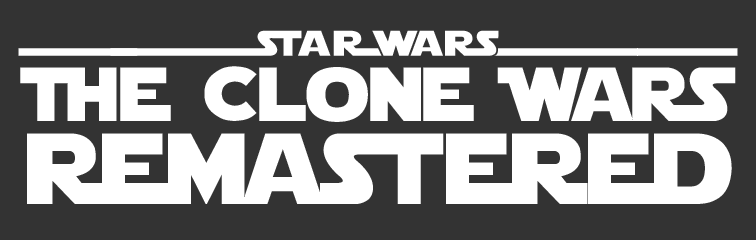
<style>
.page{position:relative;width:756px;height:240px;background:#333333}
.page>*{position:absolute;margin:0}
.t1{font:76px/83px "StarJediLogoDoubleLine1";color:#ffffff}
.t2{font:100px/83px "StarJediLogoDoubleLine1";color:#ffffff}
</style>
<div class="page">
<p class="t1" style="left:18px;top:30px;width:720px;height:174px;text-align:center">3Th3e Clo4ne Wa5RS5<br><span class="t2">remastered</span></p>
</div>
